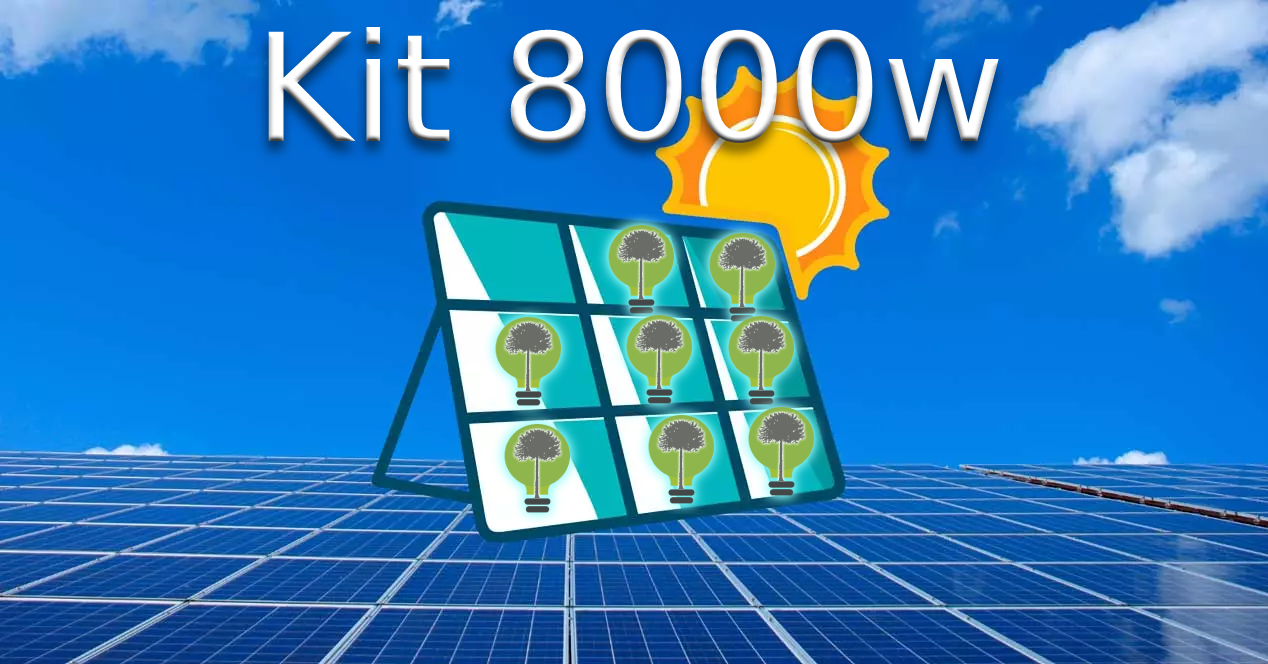
<style>
.page{position:relative;width:1268px;height:664px}
.page>*{position:absolute;margin:0}
.t1{font:150px "DejaVuSans";color:#ffffff}
</style>
<div class="page">
<p class="t1" style="left:268px;top:27px;width:731px;height:117px">Kit 8000w</p>
</div>
